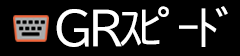
<style>
.page{position:relative;width:240px;height:56px;background:#000000}
.page>*{position:absolute;margin:0}
.t1{font:44.8px "BIZ-UDPGothic";letter-spacing:-0.075em;color:#ffffff}
</style>
<div class="page">
<p class="t1" style="left:56px;top:6px;width:172px;height:41px">GRｽﾋﾟｰﾄﾞ</p>
</div>
